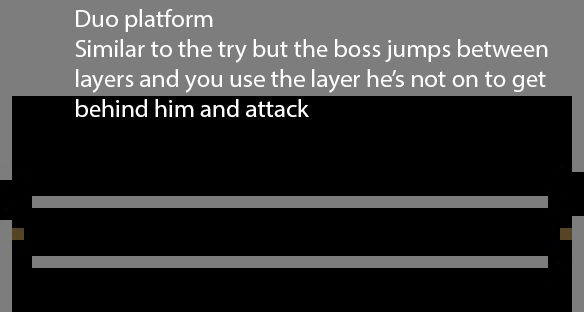
<style>
.page{position:relative;width:584px;height:312px;background:#000000}
.page>*{position:absolute;margin:0}
.t1{font:25px "MyriadPro-Regular";color:#ffffff}
</style>
<div class="page">
<p class="t1" style="left:75px;top:9px;width:473px;height:108px">Duo platform<br>Similar to the try but the boss jumps between<br>layers and you use the layer he’s not on to get<br>behind him and attack</p>
</div>
